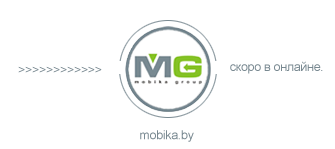
<style>
.page{position:relative;width:335px;height:149px;background:#ffffff}
.page>*{position:absolute;margin:0}
.t1{font:12.5px "ArialMT";letter-spacing:-0.025em;color:#798991}
</style>
<div class="page">
<p class="t1" style="left:230px;top:61px;width:93px;height:13px">скоро в онлайне.</p>
<p class="t1" style="left:18px;top:66px;width:84px;height:7px">&gt;&gt;&gt;&gt;&gt;&gt;&gt;&gt;&gt;&gt;&gt;&gt;</p>
<p class="t1" style="left:140px;top:130px;width:54px;height:12px">mobika.by</p>
</div>
